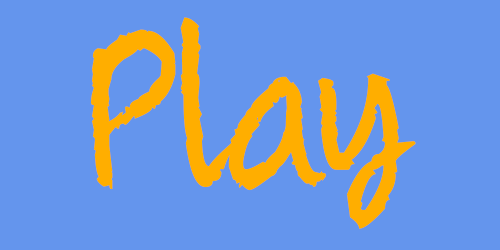
<style>
.page{position:relative;width:500px;height:250px;background:#6495ed}
.page>*{position:absolute;margin:0}
.t1{font:200px "Quikhand";color:#ffae00;scale:0.94 1}
</style>
<div class="page">
<p class="t1" style="left:91px;top:17px;width:325px;height:212px">Play</p>
</div>
